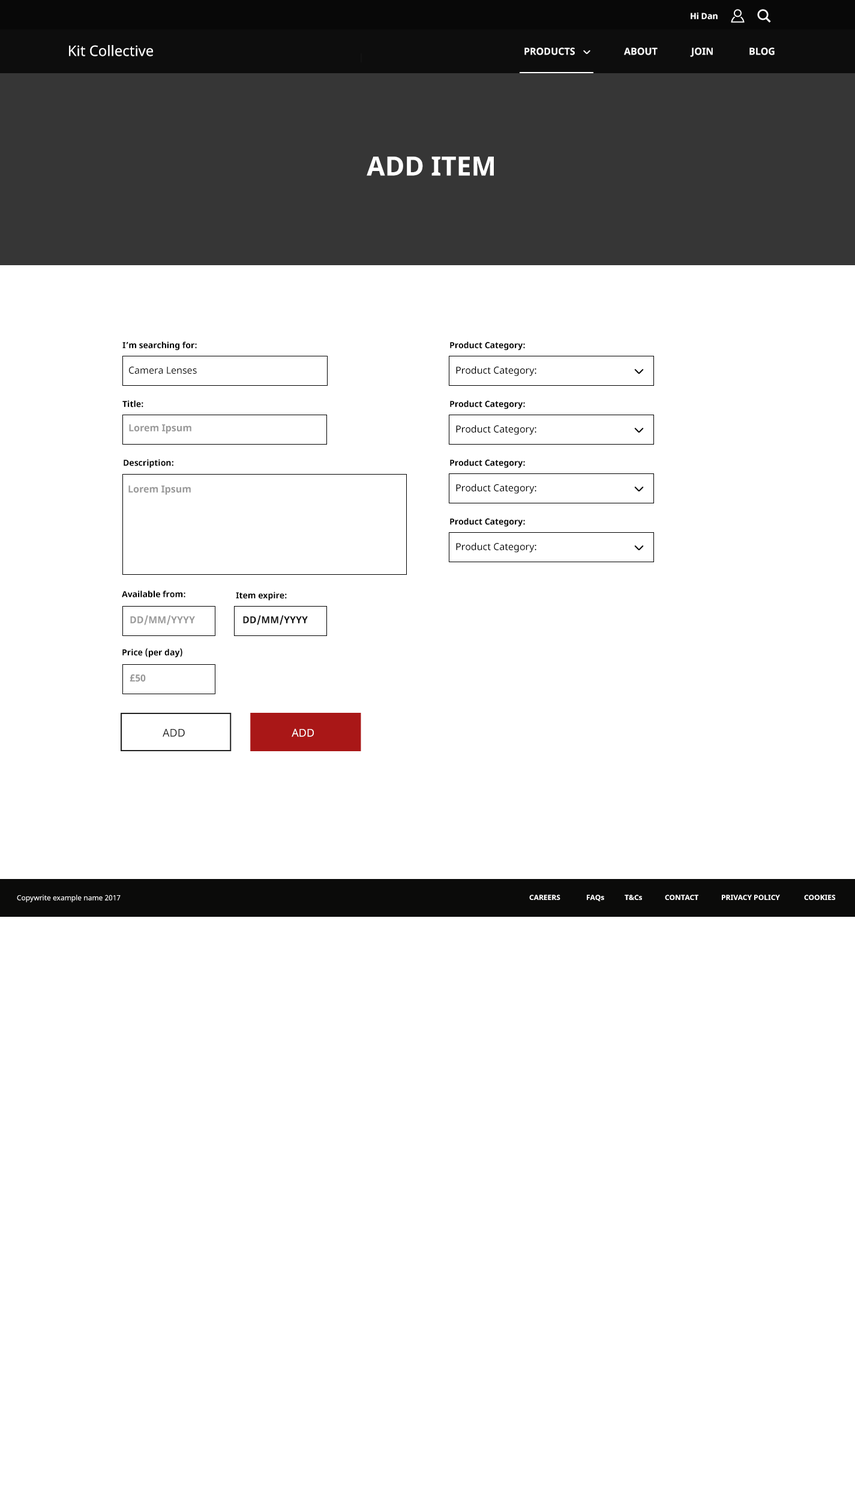
<style>
.page{position:relative;width:855px;height:1500px;background:#ffffff}
.page>*{position:absolute;margin:0}
.t1{font:8.4px "NotoSans-Bold";color:#ffffff}
.t2{font:14.4px "NotoSans";color:#ffffff}
.t3{font:9.6px "NotoSans-Bold";color:#ffffff}
.t4{font:26.4px "NotoSans-Bold";color:#ffffff;text-transform:uppercase}
.t5{font:8.4px "NotoSans-Bold";color:#000000}
.t6{font:9.6px "NotoSans";color:#000000}
.t7{font:9.6px "NotoSans";color:#111111}
.t8{font:9.6px "NotoSans-Bold";color:#999999}
.t9{font:9.6px "NotoSans-Bold";color:#111111}
.t10{font:10.8px "NotoSans";color:#222222}
.t11{font:10.8px "NotoSans";color:#ffffff}
.t12{font:7.2px "NotoSans";color:#ffffff}
.t13{font:7.2px "NotoSans-Bold";color:#ffffff}
</style>
<div class="page">
<p class="t1" style="left:691px;top:13px;width:27px;height:6px">Hi Dan</p>
<p class="t2" style="left:69px;top:45px;width:84px;height:11px">Kit Collective</p>
<p class="t3" style="left:524px;top:47px;width:51px;height:8px">PRODUCTS</p>
<p class="t3" style="left:624px;top:47px;width:34px;height:8px">ABOUT</p>
<p class="t3" style="left:690px;top:47px;width:23px;height:10px">JOIN</p>
<p class="t3" style="left:749px;top:47px;width:26px;height:8px">BLOG</p>
<p class="t4" style="left:367px;top:157px;width:127px;height:19px">Add Item</p>
<p class="t5" style="left:122px;top:341px;width:75px;height:9px">I’m searching for:</p>
<p class="t5" style="left:450px;top:341px;width:75px;height:9px">Product Category:</p>
<p class="t6" style="left:456px;top:366px;width:80px;height:10px">Product Category:</p>
<p class="t7" style="left:129px;top:367px;width:68px;height:7px">Camera Lenses</p>
<p class="t5" style="left:122px;top:400px;width:21px;height:7px">Title:</p>
<p class="t5" style="left:450px;top:400px;width:75px;height:9px">Product Category:</p>
<p class="t8" style="left:129px;top:424px;width:62px;height:10px">Lorem Ipsum</p>
<p class="t6" style="left:456px;top:425px;width:80px;height:10px">Product Category:</p>
<p class="t5" style="left:124px;top:459px;width:49px;height:9px">Description:</p>
<p class="t5" style="left:450px;top:459px;width:75px;height:9px">Product Category:</p>
<p class="t8" style="left:128px;top:485px;width:63px;height:10px">Lorem Ipsum</p>
<p class="t6" style="left:456px;top:484px;width:80px;height:10px">Product Category:</p>
<p class="t5" style="left:450px;top:518px;width:75px;height:9px">Product Category:</p>
<p class="t6" style="left:456px;top:542px;width:80px;height:11px">Product Category:</p>
<p class="t5" style="left:122px;top:590px;width:63px;height:8px">Available from:</p>
<p class="t5" style="left:236px;top:592px;width:51px;height:9px">Item expire:</p>
<p class="t8" style="left:130px;top:615px;width:65px;height:10px">DD/MM/YYYY</p>
<p class="t9" style="left:243px;top:615px;width:65px;height:10px">DD/MM/YYYY</p>
<p class="t5" style="left:122px;top:648px;width:60px;height:10px">Price (per day)</p>
<p class="t8" style="left:130px;top:674px;width:16px;height:8px">£50</p>
<p class="t10" style="left:163px;top:728px;width:22px;height:9px">ADD</p>
<p class="t11" style="left:292px;top:728px;width:22px;height:9px">ADD</p>
<p class="t12" style="left:17px;top:895px;width:104px;height:7px">Copywrite example name 2017</p>
<p class="t13" style="left:529px;top:895px;width:31px;height:5px">CAREERS</p>
<p class="t13" style="left:587px;top:895px;width:17px;height:6px">FAQs</p>
<p class="t13" style="left:625px;top:895px;width:17px;height:5px">T&amp;Cs</p>
<p class="t13" style="left:665px;top:895px;width:33px;height:5px">CONTACT</p>
<p class="t13" style="left:722px;top:895px;width:58px;height:5px">PRIVACY POLICY</p>
<p class="t13" style="left:804px;top:895px;width:31px;height:5px">COOKIES</p>
</div>
